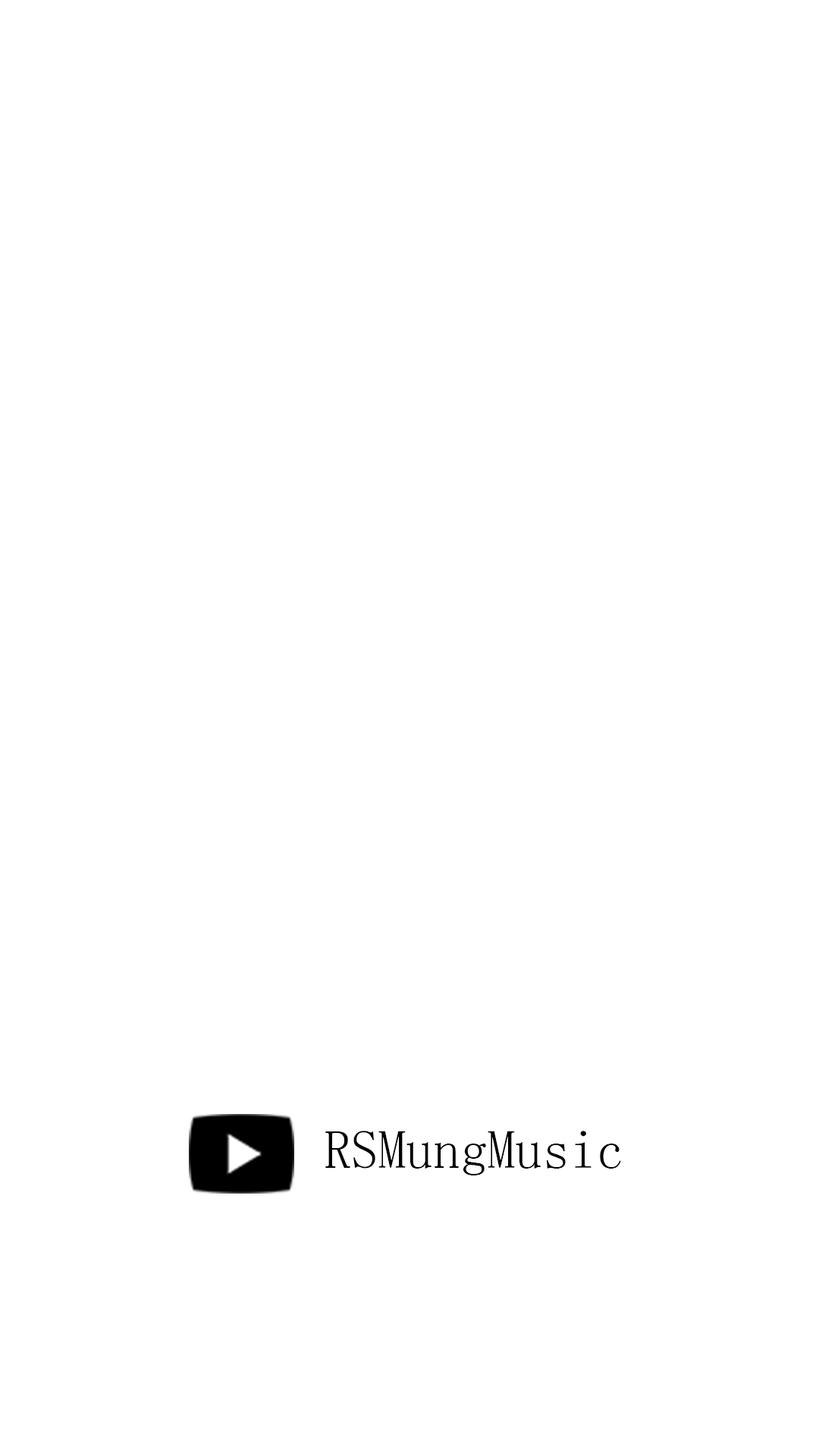
<style>
.page{position:relative;width:819px;height:1456px;background:#ffffff}
.page>*{position:absolute;margin:0}
.t1{font:54.6px "SimSun";color:#000000}
</style>
<div class="page">
<p class="t1" style="left:325px;top:1131px;width:296px;height:44px">RSMungMusic</p>
</div>
